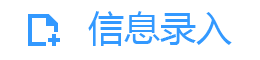
<style>
.page{position:relative;width:260px;height:60px;background:#ffffff}
.page>*{position:absolute;margin:0}
.t1{font:36px "MicrosoftYaHei";color:#3399ff}
</style>
<div class="page">
<p class="t1" style="left:88px;top:11px;width:144px;height:35px">信息录入</p>
</div>
